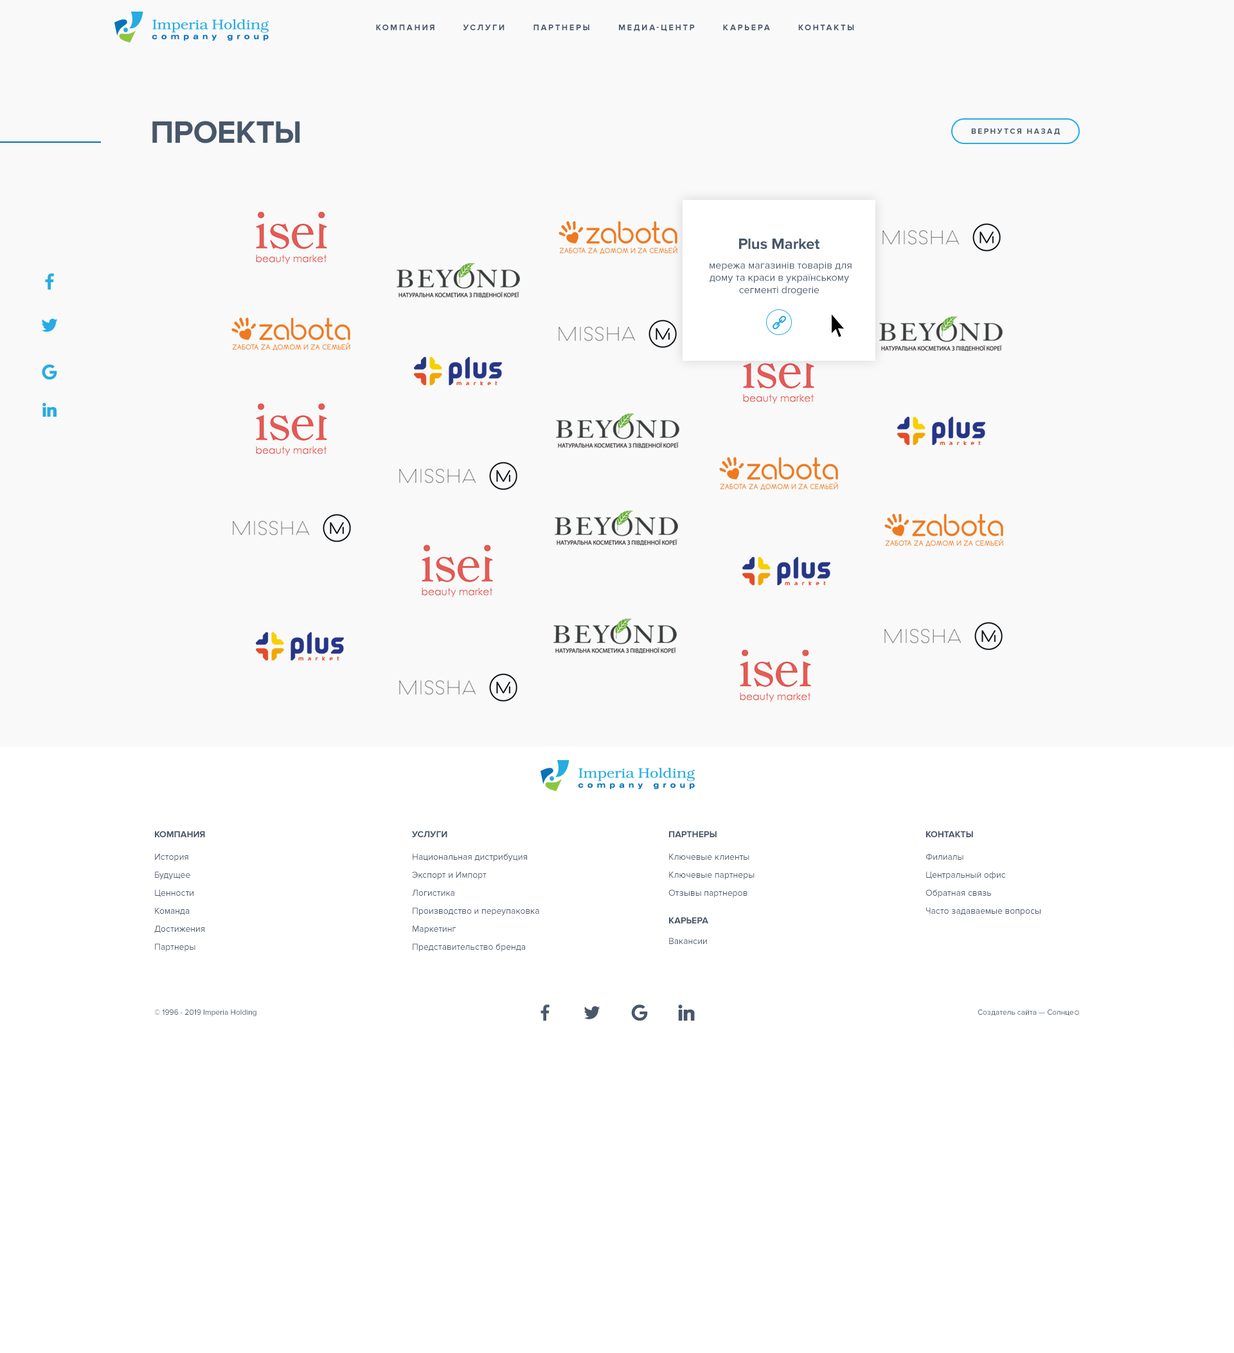
<style>
.page{position:relative;width:1234px;height:1353px;background:#f9f9f9}
.page>*{position:absolute;margin:0}
.t1{font:8.4px "ProximaNova-Bold";letter-spacing:0.2em;color:#48576a;text-transform:uppercase}
.t2{font:32.1px "ProximaNova-Bold";color:#48576a;text-transform:uppercase}
.t3{font:7.7px "ProximaNova-Bold";letter-spacing:0.2em;color:#48576a;text-transform:uppercase}
.t4{font:15.4px "ProximaNova-Bold";color:#48576a}
.t5{font:10.3px "ProximaNova-Regular";color:#48576a}
.t6{font:9px "ProximaNova-Bold";color:#48576a}
.t7{font:9px/18px "ProximaNova-Regular";color:#48576a}
.t8{font:9px "ProximaNova-Regular";color:#48576a}
.t9{font:7.7px "ProximaNova-Regular";color:#48576a}
</style>
<div class="page">
<p class="t1" style="left:376px;top:24px;width:478px;height:8px">Компания       Услуги       Партнеры       Медиа-центр       КАрьера       Контакты</p>
<p class="t2" style="left:152px;top:121px;width:148px;height:22px">проекты</p>
<p class="t3" style="left:971px;top:128px;width:89px;height:7px">Вернутся назад</p>
<p class="t4" style="left:739px;top:239px;width:81px;height:10px">Plus Market</p>
<p class="t5" style="left:710px;top:262px;width:142px;height:33px;text-align:center">мережа магазинів товарів для дому та краси в українському сегменті drogerie</p>
<p class="t6" style="left:155px;top:831px;width:50px;height:6px">КОМПАНИЯ</p>
<p class="t6" style="left:412px;top:831px;width:35px;height:6px">УСЛУГИ</p>
<p class="t6" style="left:669px;top:831px;width:48px;height:6px">ПАРТНЕРЫ</p>
<p class="t6" style="left:926px;top:831px;width:47px;height:6px">КОНТАКТЫ</p>
<p class="t7" style="left:154px;top:853px;width:51px;height:98px">История<br>Будущее<br>Ценности<br>Команда<br>Достижения<br>Партнеры</p>
<p class="t7" style="left:412px;top:853px;width:127px;height:98px">Национальная дистрибуция<br>Экспорт и Импорт<br>Логистика<br>Производство и переупаковка<br>Маркетинг<br>Представительство бренда</p>
<p class="t7" style="left:669px;top:853px;width:86px;height:44px">Ключевые клиенты<br>Ключевые партнеры<br>Отзывы партнеров</p>
<p class="t7" style="left:926px;top:853px;width:115px;height:62px">Филиалы<br>Центральный офис<br>Обратная связь<br>Часто задаваемые вопросы</p>
<p class="t6" style="left:669px;top:917px;width:39px;height:6px">КАРЬЕРА</p>
<p class="t8" style="left:669px;top:937px;width:38px;height:7px">Вакансии</p>
<p class="t9" style="left:154px;top:1009px;width:102px;height:7px">© 1996 - 2019 Imperia Holding</p>
</div>
